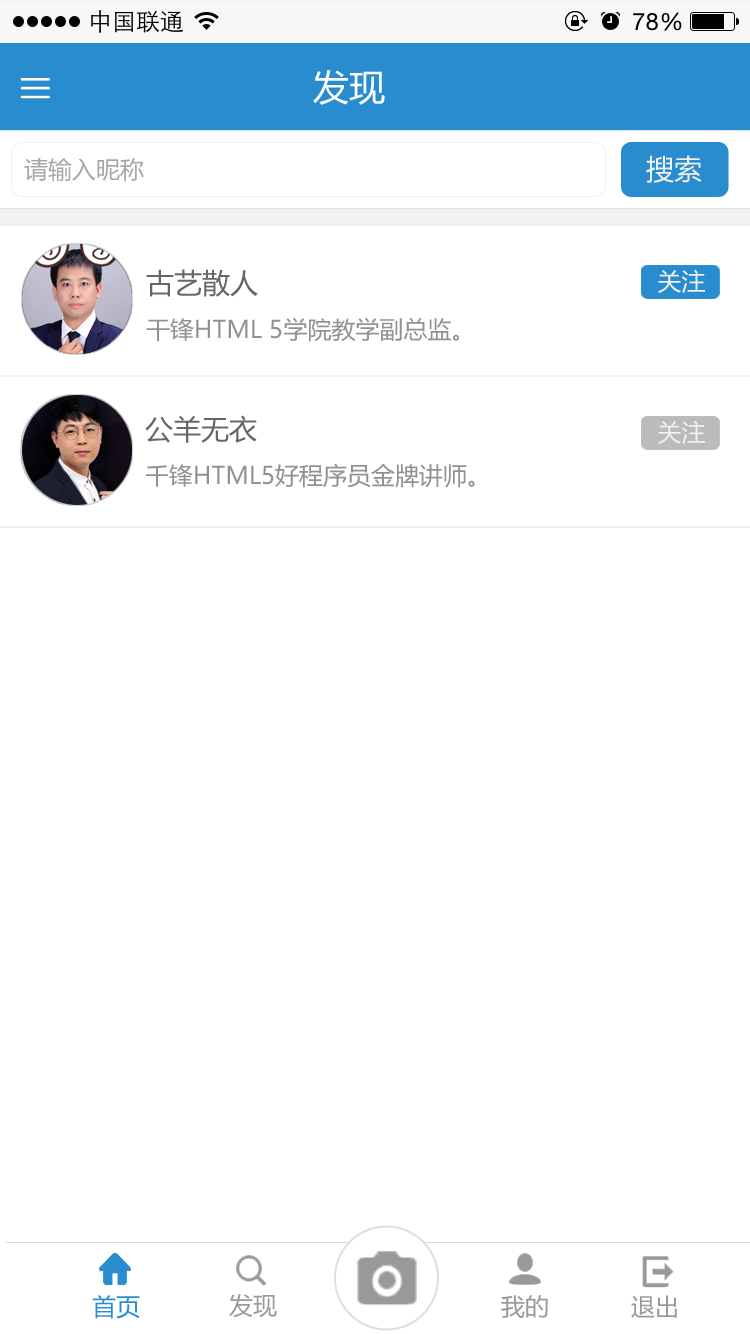
<style>
.page{position:relative;width:750px;height:1334px;background:#ffffff}
.page>*{position:absolute;margin:0}
.t1{font:36px "MicrosoftYaHei";color:#ffffff}
.t2{font:24px "MicrosoftYaHei";color:#a7a7a7}
.t3{font:28px "MicrosoftYaHei";color:#f1f1f1}
.t4{font:24px/48px "MicrosoftYaHei";color:#919191}
.t5{font:28px/48px "MicrosoftYaHei";color:#666666}
.t6{font:24px "MicrosoftYaHei";color:#f1f1f1}
.t7{font:24px "MicrosoftYaHei";color:#298ccf}
.t8{font:24px "MicrosoftYaHei";color:#999999}
</style>
<div class="page">
<p class="t1" style="left:313px;top:70px;width:72px;height:35px">发现</p>
<p class="t2" style="left:24px;top:158px;width:120px;height:24px">请输入昵称</p>
<p class="t3" style="left:646px;top:155px;width:56px;height:28px">搜索</p>
<p class="t4" style="left:146px;top:269px;width:313px;height:73px"><span class="t5">古艺散人<br></span>干锋HTML 5学院教学副总监。</p>
<p class="t6" style="left:658px;top:269px;width:47px;height:24px">关注</p>
<p class="t4" style="left:145px;top:415px;width:330px;height:73px"><span class="t5">公羊无衣<br></span>千锋HTML5好程序员金牌讲师。</p>
<p class="t6" style="left:658px;top:420px;width:47px;height:24px">关注</p>
<p class="t7" style="left:92px;top:1295px;width:48px;height:24px">首页</p>
<p class="t8" style="left:229px;top:1294px;width:48px;height:24px">发现</p>
<p class="t8" style="left:501px;top:1295px;width:47px;height:23px">我的</p>
<p class="t8" style="left:631px;top:1295px;width:46px;height:23px">退出</p>
</div>
